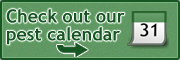
<style>
.page{position:relative;width:180px;height:60px}
.page>*{position:absolute;margin:0}
.t1{font:18px/18px "TrebuchetMS-Bold";color:#175522}
</style>
<div class="page">
<p class="t1" style="left:6px;top:9px;width:119px;height:36px">Check out our pest calendar</p>
</div>
